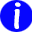
<style>
.page{position:relative;width:32px;height:32px;background:#0606fe}
.page>*{position:absolute;margin:0}
.t1{font:41.7px "ARCENA";color:#ffffff}
</style>
<div class="page">
<p class="t1" style="left:14px;top:2px;width:7px;height:27px">i</p>
</div>
